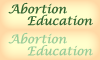
<style>
.page{position:relative;width:100px;height:60px}
.page>*{position:absolute;margin:0}
.t1{font:12px "LucidaCalligraphy-Italic";color:#336633}
.t2{font:12px "LucidaCalligraphy-Italic";color:#99cc99}
</style>
<div class="page">
<p class="t1" style="left:8px;top:2px;width:59px;height:12px">Abortion</p>
<p class="t1" style="left:27px;top:14px;width:66px;height:12px">Education</p>
<p class="t2" style="left:8px;top:32px;width:59px;height:12px">Abortion</p>
<p class="t2" style="left:27px;top:44px;width:66px;height:12px">Education</p>
</div>
